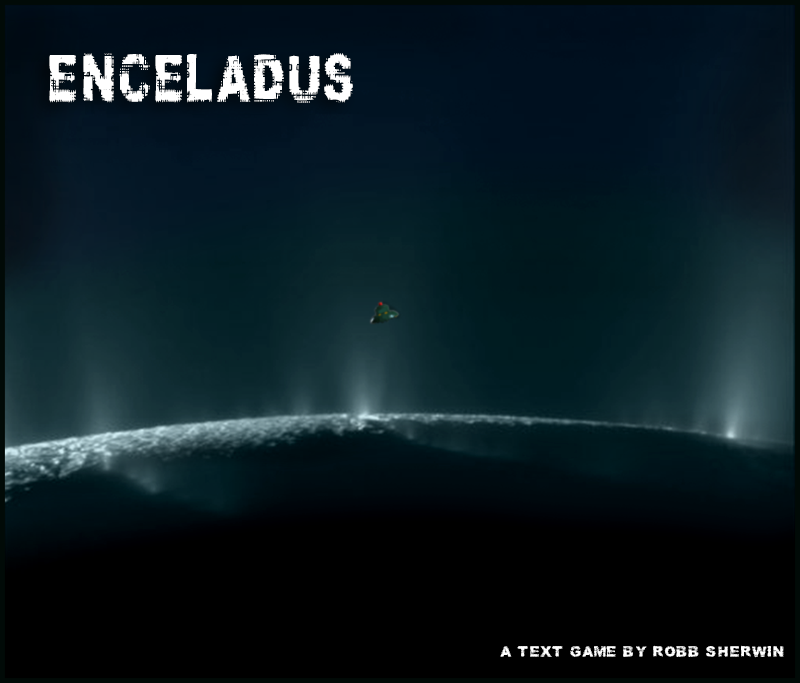
<style>
.page{position:relative;width:800px;height:683px;background:#000000}
.page>*{position:absolute;margin:0}
.t1{font:53.6px "Prefix";color:#ffffff;scale:0.67 1}
.t2{font:11.8px "Prefix";color:#ffffff}
</style>
<div class="page">
<p class="t1" style="left:49px;top:53px;width:304px;height:50px">ENCELADUS</p>
<p class="t2" style="left:500px;top:645px;width:284px;height:13px">A TEXT GAME BY ROBB SHERWIN</p>
</div>
